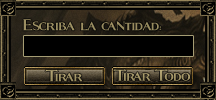
<style>
.page{position:relative;width:216px;height:100px}
.page>*{position:absolute;margin:0}
.t1{font:30px "Fleet-Street";color:#9b8f62}
.t2{font:30px "Fleet-Street";color:#a29566}
.t3{font:30px "Fleet-Street";color:#a69869}
</style>
<div class="page">
<p class="t1" style="left:23px;top:19px;width:139px;height:12px">Escriba la cantidad:</p>
<p class="t2" style="left:45px;top:69px;width:38px;height:13px">Tirar</p>
<p class="t3" style="left:113px;top:69px;width:77px;height:12px">Tirar Todo</p>
</div>
